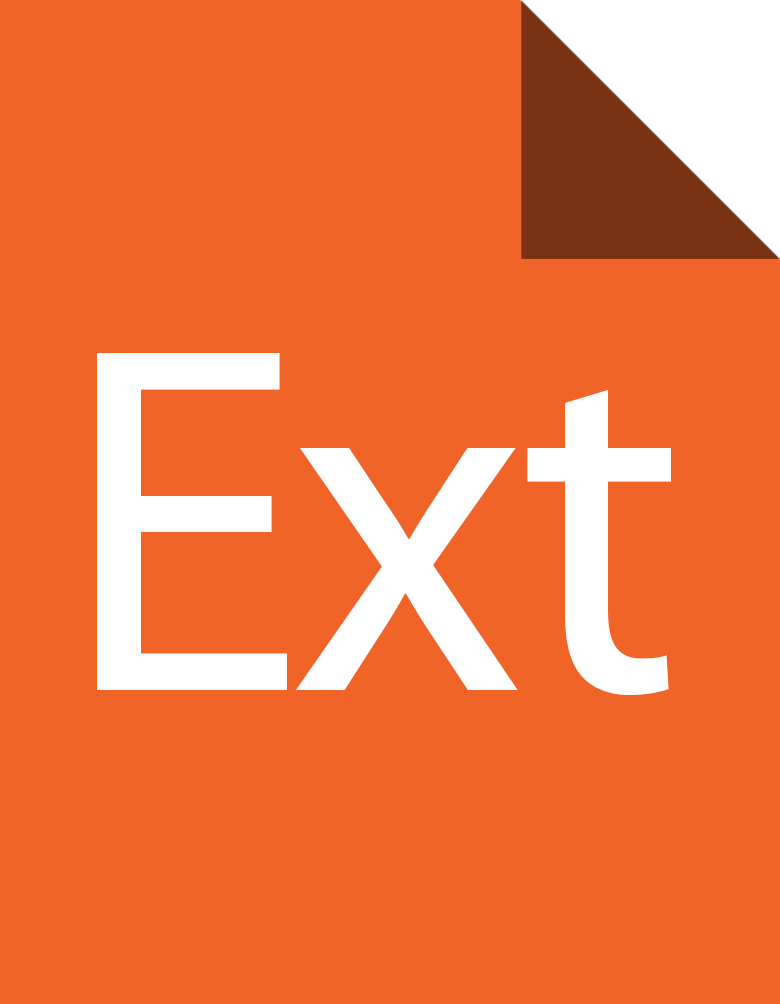
<style>
.page{position:relative;width:780px;height:1004px;background:#f16428}
.page>*{position:absolute;margin:0}
.t1{font:500px "MyriadPro-Regular";letter-spacing:-0.025em;color:#ffffff}
</style>
<div class="page">
<p class="t1" style="left:97px;top:353px;width:574px;height:342px">Ext</p>
</div>
